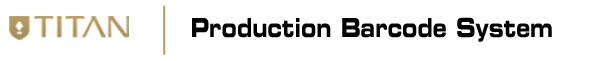
<style>
.page{position:relative;width:597px;height:61px;background:#ffffff}
.page>*{position:absolute;margin:0}
.t1{font:26.1px "Eurostile-BoldExtendedTwo";color:#010101;scale:0.72 1}
</style>
<div class="page">
<p class="t1" style="left:192px;top:17px;width:360px;height:25px">Production Barcode System</p>
</div>
